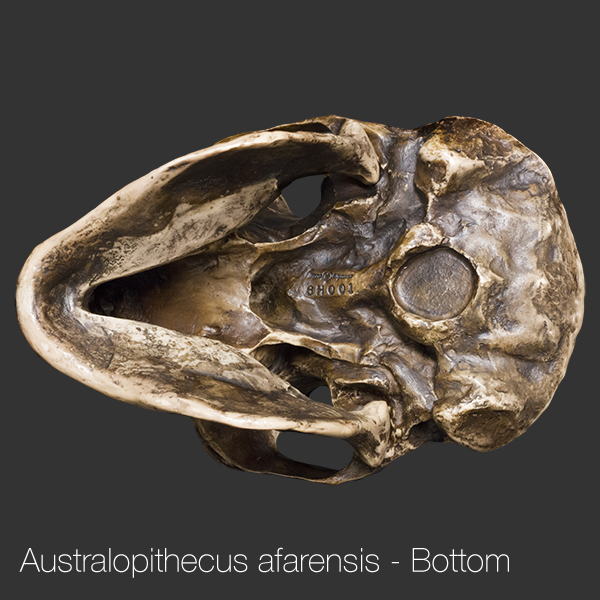
<style>
.page{position:relative;width:600px;height:600px;background:#333333}
.page>*{position:absolute;margin:0}
.t1{font:33.3px "HelveticaNeue-Thin";color:#ffffff}
</style>
<div class="page">
<p class="t1" style="left:19px;top:547px;width:490px;height:31px">Australopithecus afarensis - Bottom</p>
</div>
